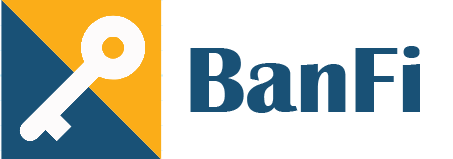
<style>
.page{position:relative;width:453px;height:159px;background:#ffffff}
.page>*{position:absolute;margin:0}
.t1{font:96px "BritannicBold";color:#195176}
</style>
<div class="page">
<p class="t1" style="left:190px;top:46px;width:230px;height:67px">BanFi</p>
</div>
